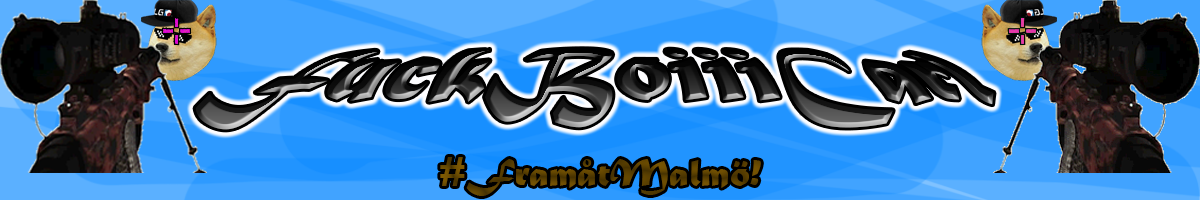
<style>
.page{position:relative;width:1200px;height:200px}
.page>*{position:absolute;margin:0}
.t1{font:75px "MaturaMTScriptCapitals"}
.t2{font:40px "MaturaMTScriptCapitals";color:#5b4001}
</style>
<div class="page">
<p class="t1" style="left:195px;top:49px;width:799px;height:81px">FuckBoiiiCarl</p>
<p class="t2" style="left:440px;top:157px;width:321px;height:39px">#FramåtMalmö!</p>
</div>
